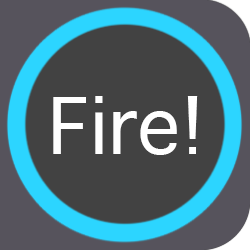
<style>
.page{position:relative;width:250px;height:250px;background:#424242}
.page>*{position:absolute;margin:0}
.t1{font:76px "Sathu";color:#ffffff}
</style>
<div class="page">
<p class="t1" style="left:53px;top:96px;width:145px;height:59px">Fire!</p>
</div>
